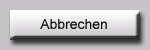
<style>
.page{position:relative;width:150px;height:50px;background:#c6c3c6}
.page>*{position:absolute;margin:0}
.t1{font:14px "ArialMT";color:#000000}
</style>
<div class="page">
<p class="t1" style="left:40px;top:19px;width:67px;height:10px">Abbrechen</p>
</div>
